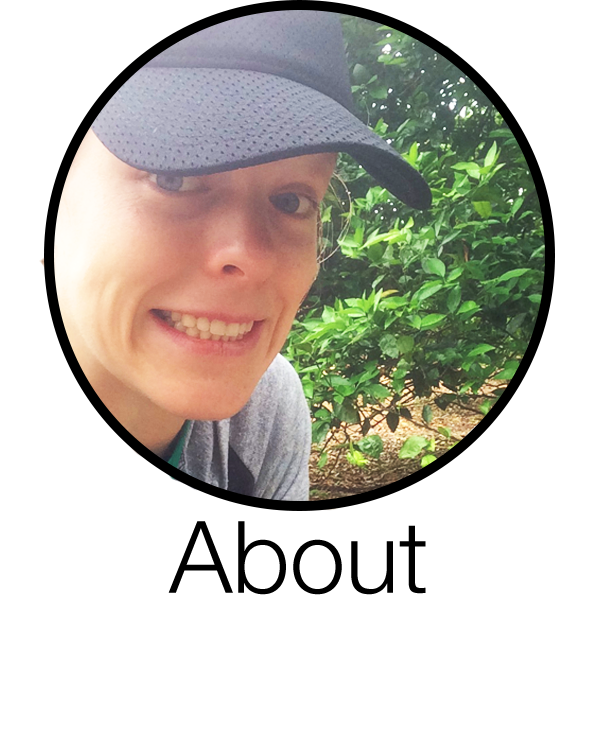
<style>
.page{position:relative;width:600px;height:750px;background:#ffffff}
.page>*{position:absolute;margin:0}
.t1{font:100px "HelveticaNeue-Light";color:#000000}
</style>
<div class="page">
<p class="t1" style="left:168px;top:521px;width:258px;height:74px">About</p>
</div>
